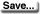
<style>
.page{position:relative;width:40px;height:14px;background:#ffffff}
.page>*{position:absolute;margin:0}
.t1{font:10px "Helvetica-Bold";color:#000000}
</style>
<div class="page">
<p class="t1" style="left:3px;top:1px;width:31px;height:8px">Save...</p>
</div>
